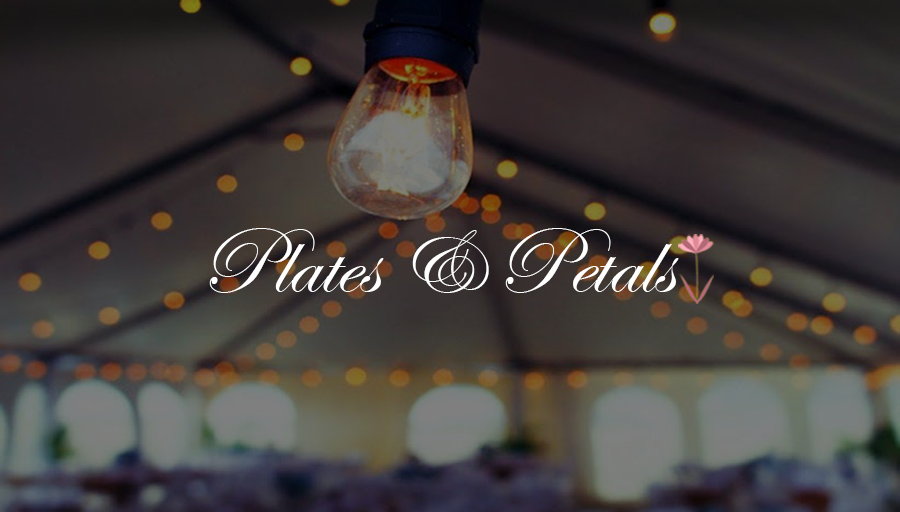
<style>
.page{position:relative;width:900px;height:512px}
.page>*{position:absolute;margin:0}
.t1{font:94.7px "EdwardianScriptITC";color:#ffffff}
</style>
<div class="page">
<p class="t1" style="left:209px;top:228px;width:470px;height:65px">Plates &amp; Petals</p>
</div>
